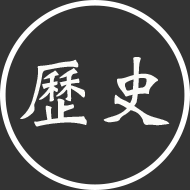
<style>
.page{position:relative;width:190px;height:190px;background:#333333}
.page>*{position:absolute;margin:0}
.t1{font:83.3px "Weibei-TC-Bold";color:#fbfbf8;scale:0.94 1}
</style>
<div class="page">
<p class="t1" style="left:20px;top:57px;width:150px;height:70px">歷史</p>
</div>
